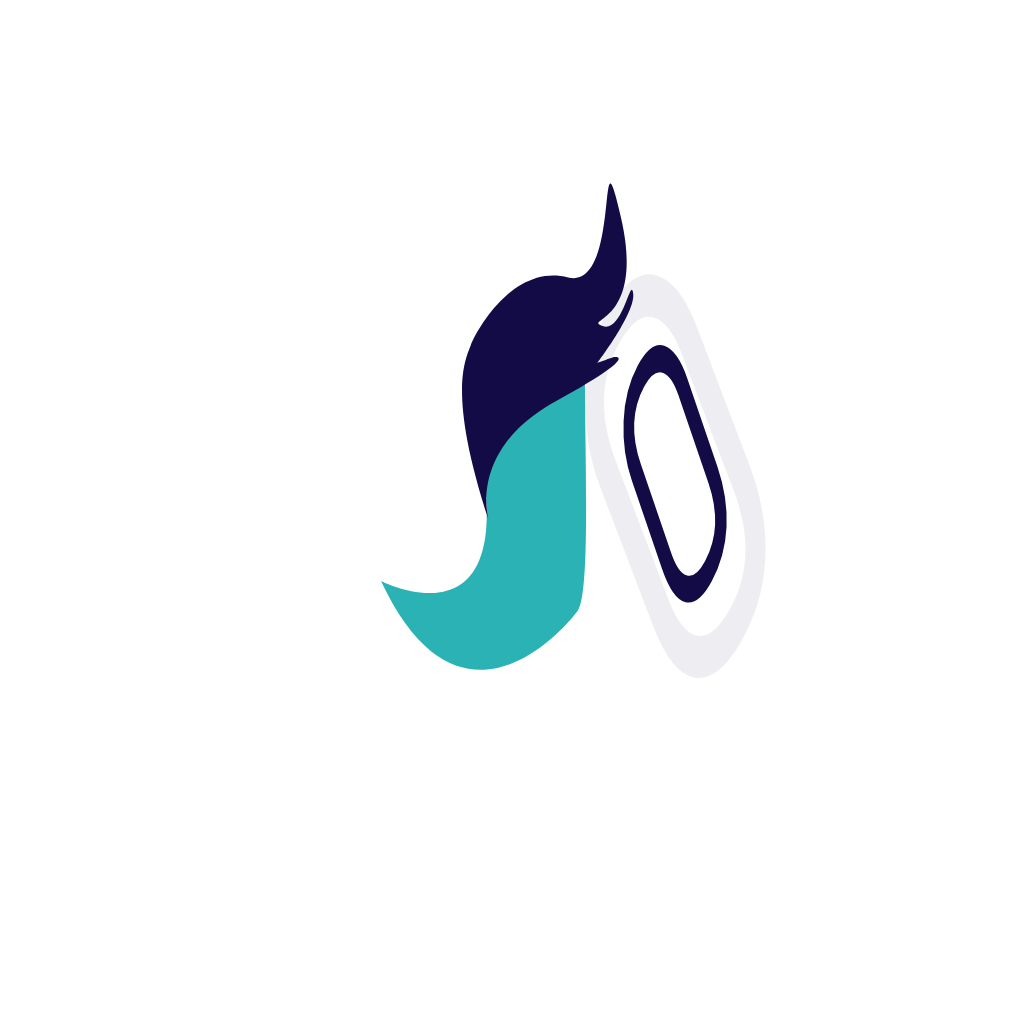
<style>
.page{position:relative;width:1024px;height:1024px;background:#ffffff}
.page>*{position:absolute;margin:0}
.t1{font:329px "saxMono";color:#130b46;scale:0.86 1}
</style>
<div class="page">
<p class="t1" style="left:623px;top:345px;width:104px;height:258px;rotate:-62deg">0</p>
</div>
